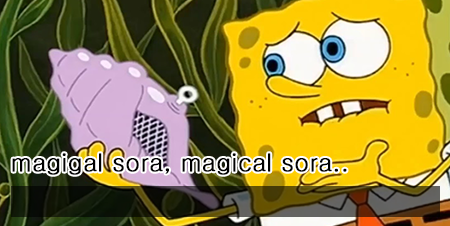
<style>
.page{position:relative;width:450px;height:226px}
.page>*{position:absolute;margin:0}
.t1{font:24px "Gulim";color:#000000;font-weight:bold}
</style>
<div class="page">
<p class="t1" style="left:12px;top:153px;width:335px;height:22px">magigal sora, magical sora..</p>
</div>
